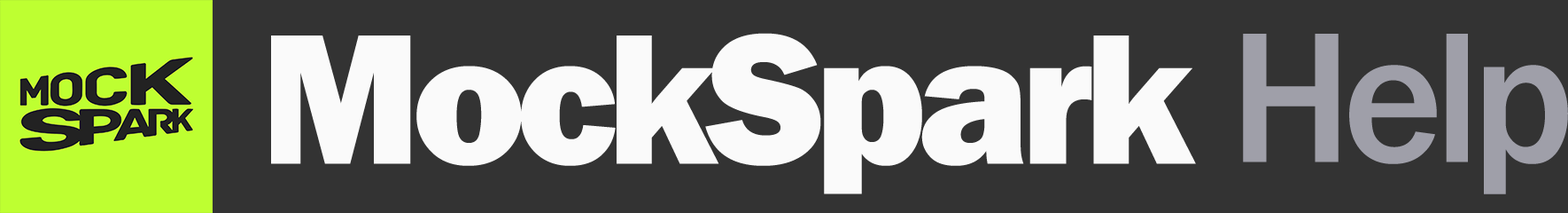
<style>
.page{position:relative;width:1568px;height:213px;background:#333333}
.page>*{position:absolute;margin:0}
.t1{font:191.9px "FranklinGothic-Heavy";letter-spacing:-0.05em;color:#fafafa}
.t2{font:191.9px "FranklinGothic-Medium";letter-spacing:-0.05em;color:#9f9fa9}
</style>
<div class="page">
<p class="t1" style="left:271px;top:33px;width:925px;height:161px">MockSpark</p>
<p class="t2" style="left:1243px;top:34px;width:325px;height:160px">Help</p>
</div>
